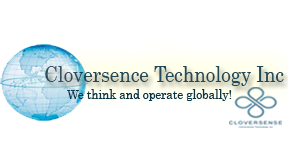
<style>
.page{position:relative;width:288px;height:144px;background:#ffffff}
.page>*{position:absolute;margin:0}
.t1{font:22.3px "Century";color:#083447;scale:0.85 1}
.t2{font:12.8px "Century";color:#083447;scale:0.91 1}
</style>
<div class="page">
<p class="t1" style="left:45px;top:66px;width:239px;height:20px;opacity:0.9">Cloversence Technology Inc</p>
<p class="t2" style="left:67px;top:89px;width:165px;height:12px">We think and operate globally!</p>
</div>
